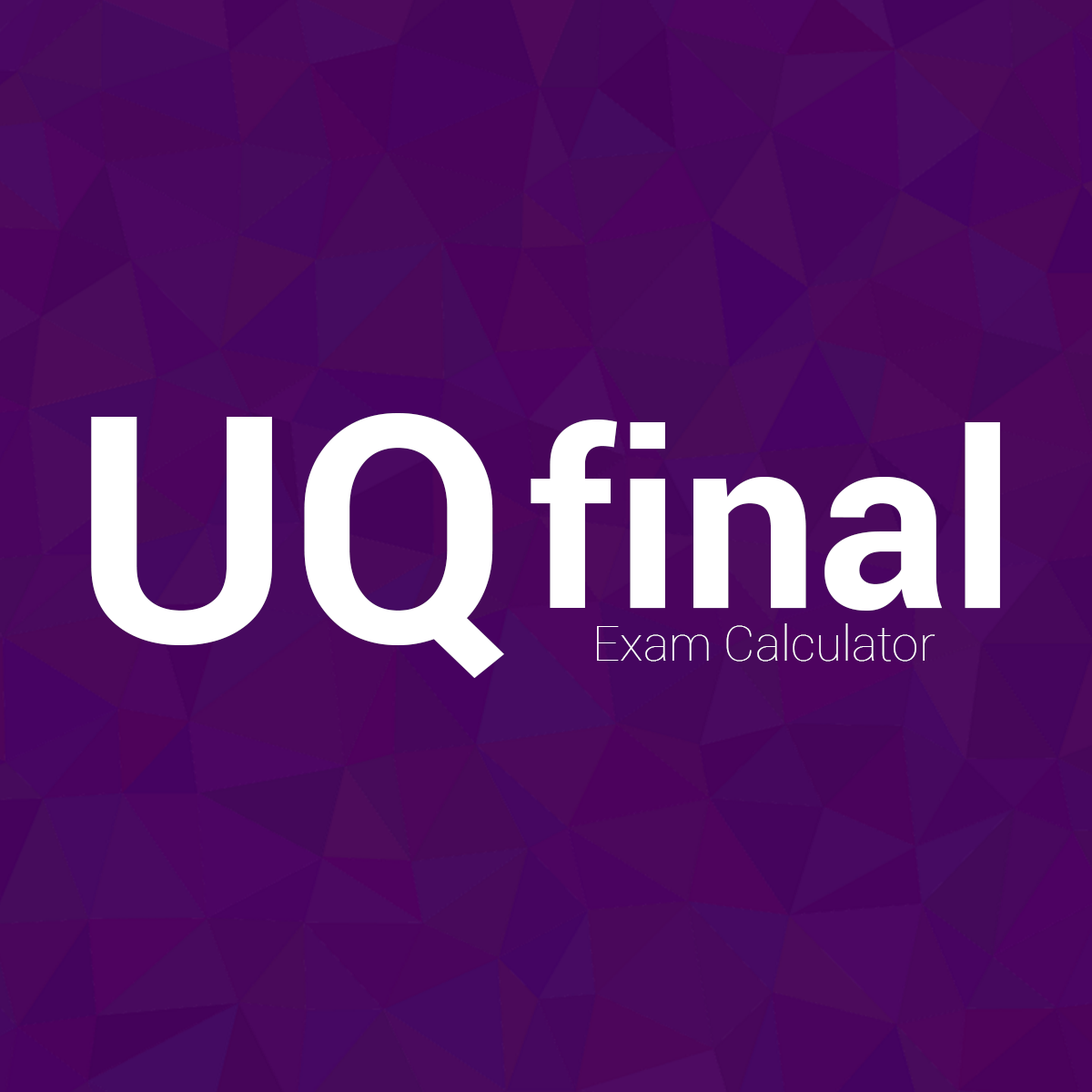
<style>
.page{position:relative;width:1092px;height:1092px}
.page>*{position:absolute;margin:0}
.t1{font:316.3px "Roboto-Bold";color:#ffffff}
.t2{font:244px "Roboto-Bold";color:#ffffff}
.t3{font:48.4px "Roboto-Thin";color:#ffffff}
</style>
<div class="page">
<p class="t1" style="left:91px;top:413px;width:413px;height:265px">UQ</p>
<p class="t2" style="left:531px;top:420px;width:469px;height:191px">final</p>
<p class="t3" style="left:597px;top:623px;width:338px;height:39px">Exam Calculator</p>
</div>
